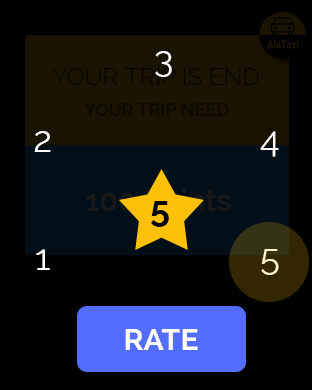
<style>
.page{position:relative;width:312px;height:390px;background:#000000}
.page>*{position:absolute;margin:0}
.t1{font:36px "Raleway";color:#ffffff}
.t2{font:18px "Raleway-Bold";color:#0d0a00;text-transform:uppercase}
.t3{font:36px "Raleway-Bold";color:#000000}
.t4{font:36px "Raleway";color:#fff3cd}
.t5{font:30px "Raleway-Bold";color:#ffffff;text-transform:uppercase}
</style>
<div class="page">
<p class="t1" style="left:155px;top:51px;width:17px;height:26px">3</p>
<p class="t2" style="left:84px;top:103px;width:145px;height:13px">Your trip need</p>
<p class="t1" style="left:34px;top:131px;width:17px;height:21px">2</p>
<p class="t1" style="left:260px;top:131px;width:19px;height:26px">4</p>
<p class="t3" style="left:151px;top:201px;width:18px;height:26px">5</p>
<p class="t1" style="left:36px;top:249px;width:14px;height:21px">1</p>
<p class="t4" style="left:261px;top:249px;width:18px;height:26px">5</p>
<p class="t5" style="left:125px;top:329px;width:73px;height:21px">Rate</p>
</div>
